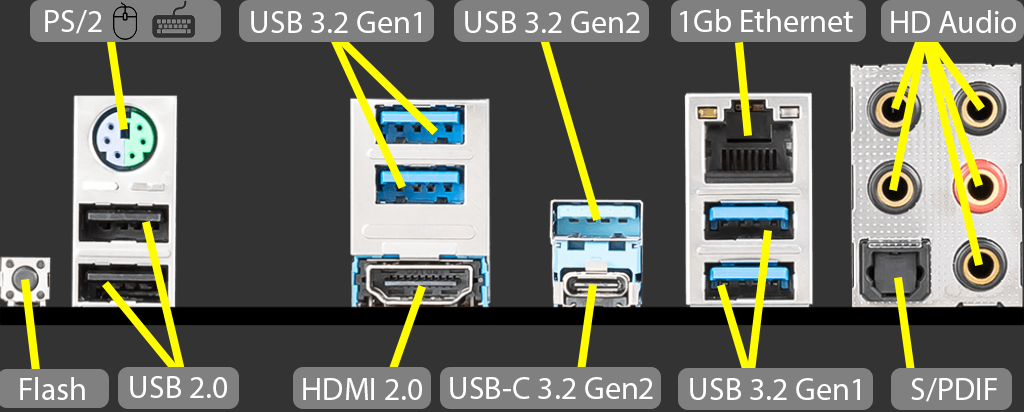
<style>
.page{position:relative;width:1024px;height:412px;background:#333333}
.page>*{position:absolute;margin:0}
.t1{font:32px "MyriadPro-Regular";color:#ffffff}
</style>
<div class="page">
<p class="t1" style="left:45px;top:10px;width:57px;height:24px">PS/2</p>
<p class="t1" style="left:251px;top:11px;width:170px;height:22px">USB 3.2 Gen1</p>
<p class="t1" style="left:465px;top:11px;width:175px;height:22px">USB 3.2 Gen2</p>
<p class="t1" style="left:680px;top:9px;width:173px;height:23px">1Gb Ethernet</p>
<p class="t1" style="left:891px;top:10px;width:125px;height:23px">HD Audio</p>
<p class="t1" style="left:20px;top:377px;width:65px;height:23px">Flash</p>
<p class="t1" style="left:130px;top:376px;width:97px;height:22px">USB 2.0</p>
<p class="t1" style="left:450px;top:377px;width:203px;height:22px">USB-C 3.2 Gen2</p>
<p class="t1" style="left:303px;top:378px;width:119px;height:22px">HDMI 2.0</p>
<p class="t1" style="left:690px;top:378px;width:170px;height:22px">USB 3.2 Gen1</p>
<p class="t1" style="left:911px;top:378px;width:86px;height:24px">S/PDIF</p>
</div>
